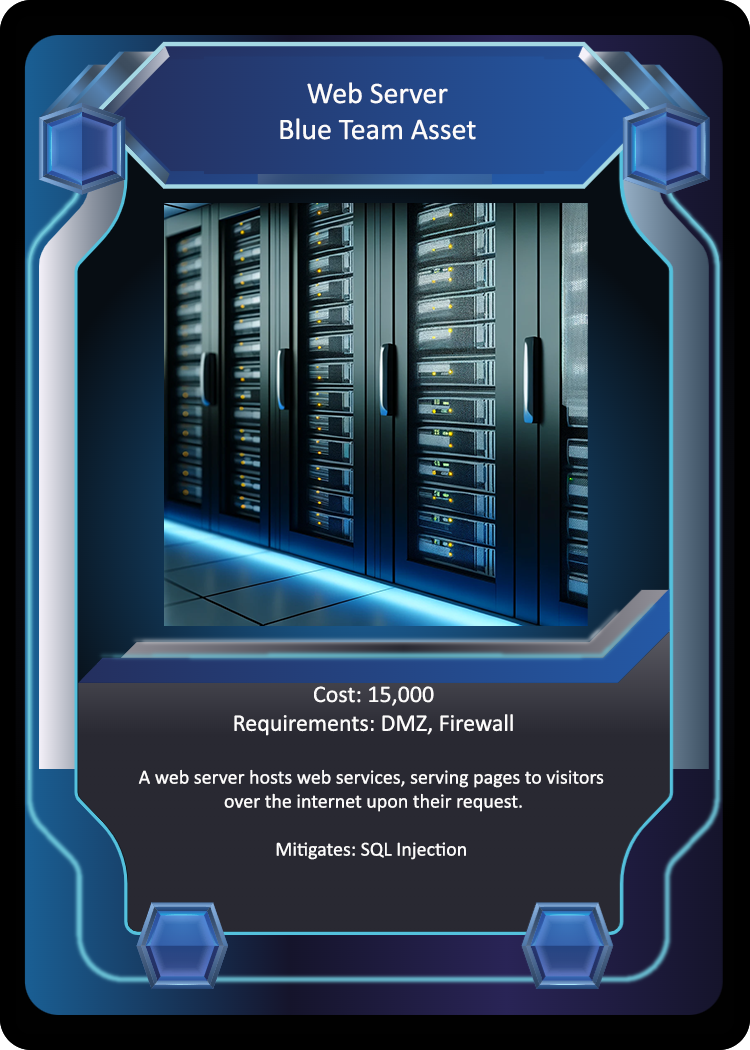
<style>
.page{position:relative;width:750px;height:1050px}
.page>*{position:absolute;margin:0}
.t1{font:30px "Calibri";color:#fcfbfb}
.t2{font:20px "Calibri";color:#fcfbfb}
.t3{font:24px "Calibri";color:#fcfbfb}
</style>
<div class="page">
<p class="t1" style="left:280px;top:82px;width:196px;height:58px;text-align:center">Web Server<br>Blue Team Asset</p>
<p class="t2" style="left:138px;top:686px;width:466px;height:174px;text-align:center"><span class="t3">Cost: 15,000<br>Requirements: DMZ, Firewall<br><br></span>A web server hosts web services, serving pages to visitors <br>over the internet upon their request.<br><br>Mitigates: SQL Injection</p>
</div>
